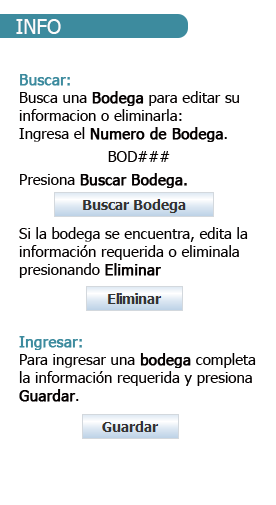
<style>
.page{position:relative;width:276px;height:505px;background:#ffffff}
.page>*{position:absolute;margin:0}
.t1{font:20px "Tahoma";color:#fcfbfb}
.t2{font:15px "Tahoma";color:#040000}
.t3{font:15px "Tahoma";color:#3d8b9e;font-weight:bold}
.t4{font:15px "Tahoma";color:#040000;font-weight:bold}
</style>
<div class="page">
<p class="t1" style="left:16px;top:19px;width:45px;height:15px">INFO</p>
<p class="t2" style="left:19px;top:74px;width:237px;height:328px"><span class="t3">Buscar:<br></span>Busca una <span class="t4">Bodega</span> para editar su informacion o eliminarla:<br>Ingresa el <span class="t4">Numero de Bodega</span>.<br>BOD###<br>Presiona <span class="t4">Buscar Bodega.<br></span><br><br>Si la bodega se encuentra, edita la información requerida o eliminala presionando <span class="t4">Eliminar<br><br><br><br></span><span class="t3">Ingresar:<br></span>Para ingresar una <span class="t4">bodega</span> completa la información requerida y presiona <span class="t4">Guardar</span>.</p>
</div>
